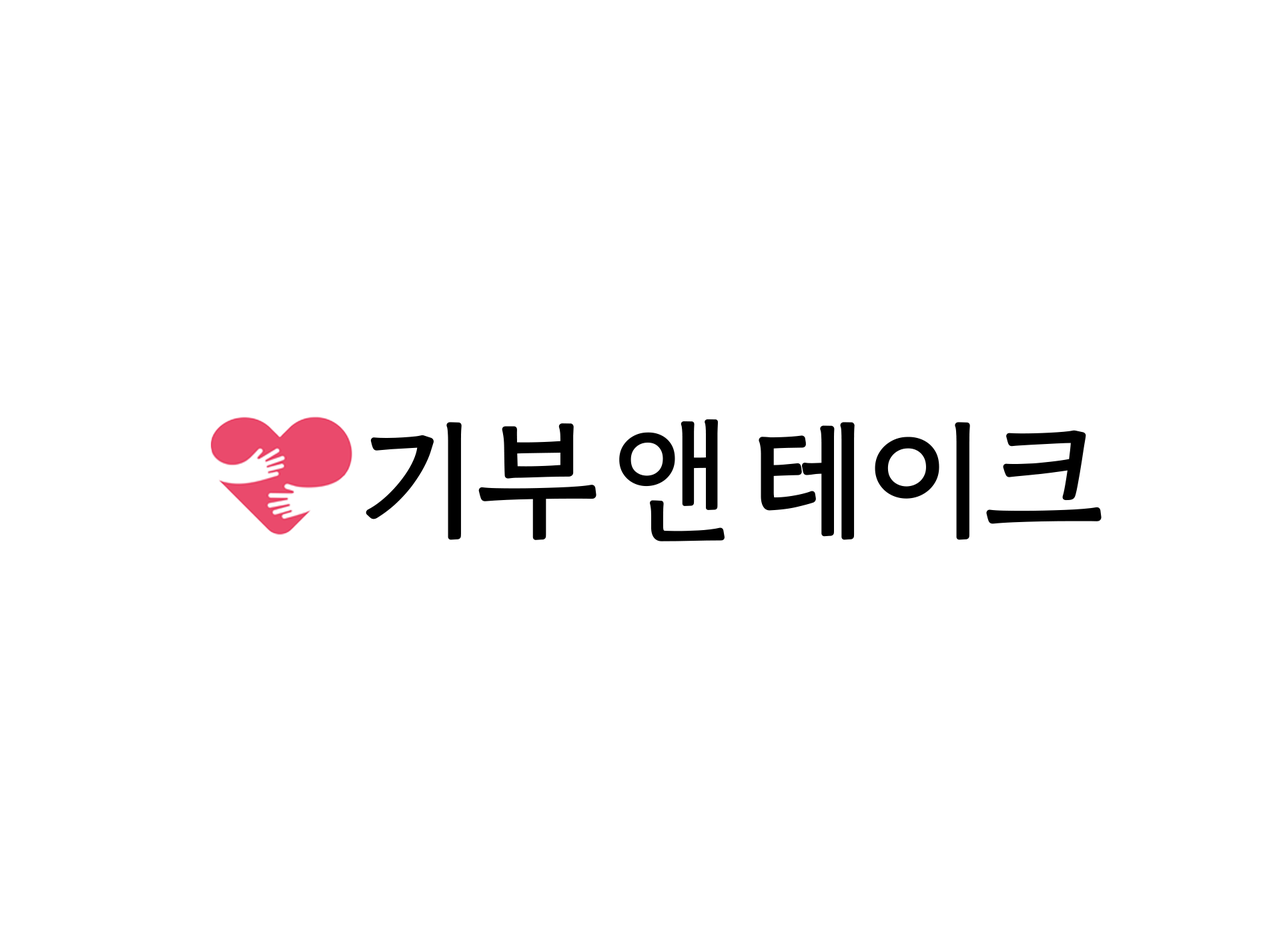
<style>
.page{position:relative;width:1261px;height:946px;background:#ffffff}
.page>*{position:absolute;margin:0}
.t1{font:132.8px "GowunDodum-Regular";letter-spacing:-0.025em;color:#000000;font-weight:bold}
</style>
<div class="page">
<p class="t1" style="left:366px;top:422px;width:231px;height:118px">기부</p>
<p class="t1" style="left:619px;top:419px;width:106px;height:122px">앤</p>
<p class="t1" style="left:759px;top:422px;width:343px;height:118px">테이크</p>
</div>
